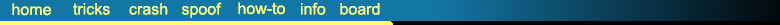
<style>
.page{position:relative;width:780px;height:25px;background:#1377a5}
.page>*{position:absolute;margin:0}
.t1{font:16px "ArialMT";color:#ffff79}
</style>
<div class="page">
<p class="t1" style="left:12px;top:3px;width:39px;height:13px">home</p>
<p class="t1" style="left:73px;top:3px;width:37px;height:12px">tricks</p>
<p class="t1" style="left:129px;top:3px;width:39px;height:12px">crash</p>
<p class="t1" style="left:181px;top:2px;width:41px;height:16px">spoof</p>
<p class="t1" style="left:238px;top:2px;width:47px;height:13px">how-to</p>
<p class="t1" style="left:301px;top:2px;width:25px;height:13px">info</p>
<p class="t1" style="left:340px;top:3px;width:40px;height:12px">board</p>
</div>
